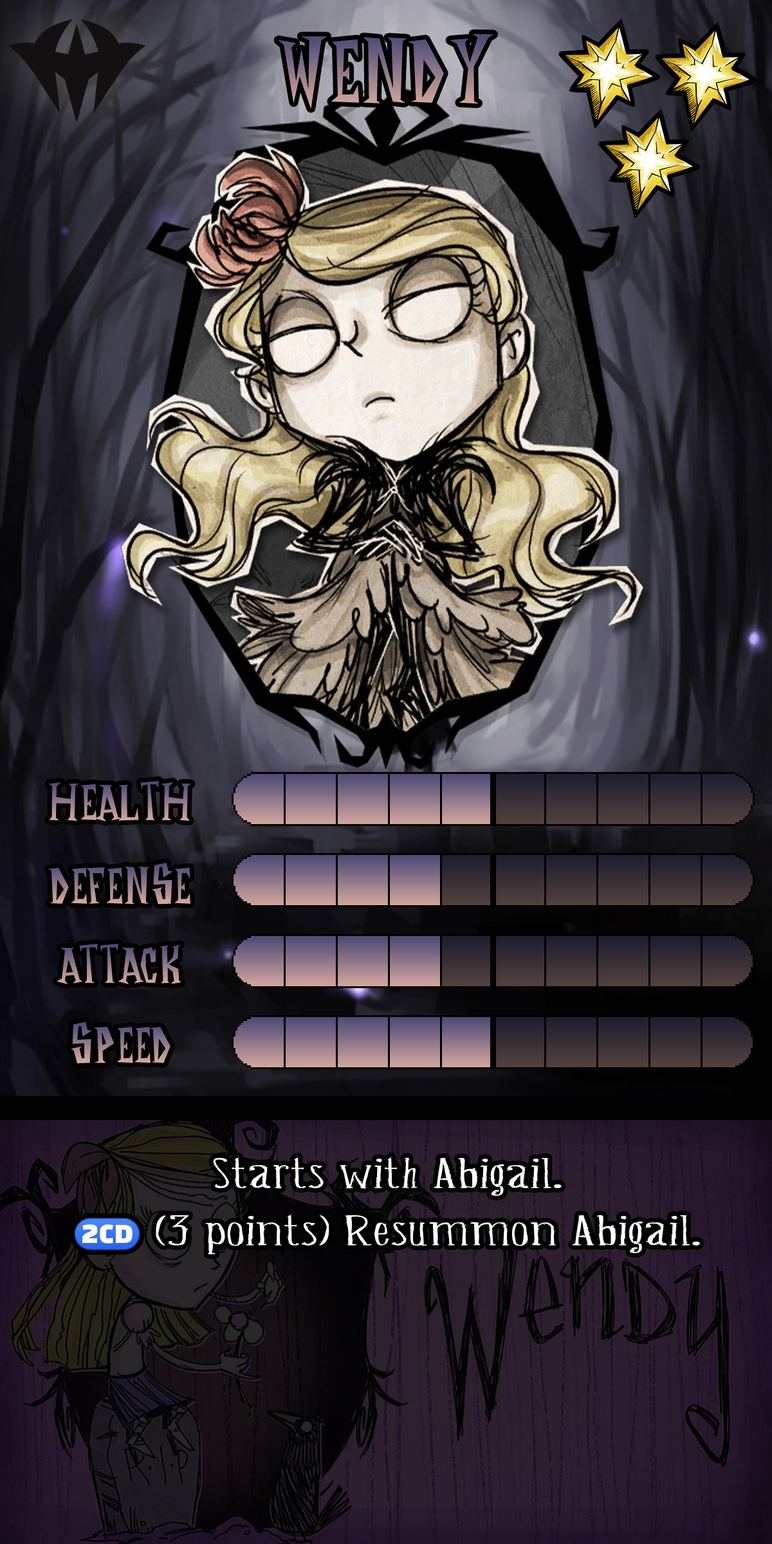
<style>
.page{position:relative;width:772px;height:1544px}
.page>*{position:absolute;margin:0}
.t1{font:170.5px "DontStarveNameFont"}
.t2{font:96.5px "DontStarveNameFont"}
.t3{font:56.7px/57.3px "Belisaplumillamanual";color:#ffffff;scale:2.34 1}
.t4{font:56.6px/57.3px "stoogedings-Regular";letter-spacing:0.418em;color:#ffffff}
</style>
<div class="page">
<p class="t1" style="left:278px;top:33px;width:216px;height:76px">Wendy</p>
<p class="t2" style="left:49px;top:781px;width:142px;height:41px">Health</p>
<p class="t2" style="left:48px;top:863px;width:142px;height:42px">Defense</p>
<p class="t2" style="left:57px;top:944px;width:124px;height:40px">Attack</p>
<p class="t2" style="left:71px;top:1022px;width:100px;height:42px">Speed</p>
<p class="t3" style="left:74px;top:1157px;width:626px;height:98px;text-align:center">Starts with Abigail.<br><span class="t4">(2CD)</span>(3 points) Resummon Abigail.</p>
</div>
